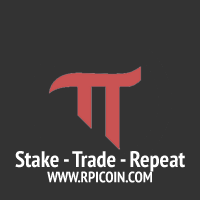
<style>
.page{position:relative;width:200px;height:200px;background:#333333}
.page>*{position:absolute;margin:0}
.t1{font:22.4px "PTSans-NarrowBold";color:#ffffff}
.t2{font:15px "PTSans-NarrowBold";color:#ffffff}
</style>
<div class="page">
<p class="t1" style="left:15px;top:151px;width:170px;height:21px">Stake - Trade - Repeat</p>
<p class="t2" style="left:47px;top:171px;width:105px;height:12px">WWW.RPICOIN.COM</p>
</div>
